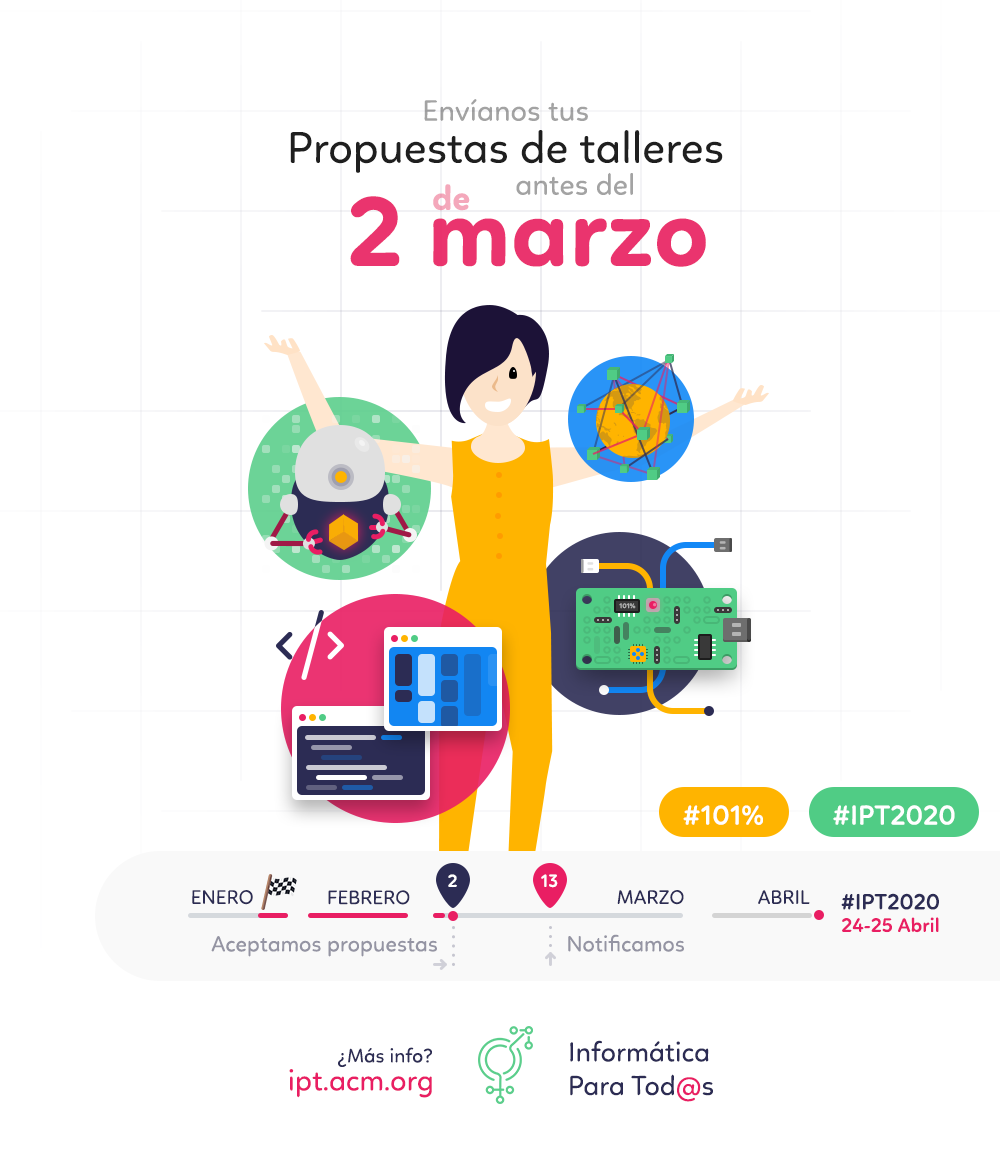
<style>
.page{position:relative;width:1000px;height:1150px;background:#ffffff}
.page>*{position:absolute;margin:0}
.t1{font:30px "Linotte-Regular";color:#a3a3a3}
.t2{font:45px "Linotte-Regular";color:#1f1f1f}
.t3{font:35px "Linotte-Bold";color:#f4a8bb}
.t4{font:101px "Linotte-Bold";color:#e91e63}
.t5{font:7px "Linotte-Bold";color:#afafaf;text-transform:uppercase}
.t6{font:28px "Linotte-SemiBold";color:#ffffff}
.t7{font:18px "Linotte-SemiBold";color:#ffffff;text-transform:uppercase}
.t8{font:20px "Linotte-Regular";color:#2c2c54;text-transform:uppercase}
.t9{font:22.5px "Linotte-SemiBold";color:#2c2c54}
.t10{font:20px "Linotte-SemiBold";color:#e91e63}
.t11{font:22.5px "Linotte-Regular";color:#9494a3}
.t12{font:20px "Linotte-Regular";color:#2c2c54}
.t13{font:28px "Linotte-Regular";color:#2c2c54}
.t14{font:28px "Linotte-Regular";color:#e91e63}
.t15{font:30px "Linotte-Regular";color:#e91e63}
</style>
<div class="page">
<p class="t1" style="left:424px;top:99px;width:164px;height:22px">Envíanos tus</p>
<p class="t2" style="left:290px;top:130px;width:433px;height:43px">Propuestas de talleres</p>
<p class="t1" style="left:516px;top:172px;width:117px;height:23px">antes del</p>
<p class="t3" style="left:433px;top:184px;width:37px;height:27px">de</p>
<p class="t4" style="left:350px;top:196px;width:356px;height:71px;opacity:0.95">2 marzo</p>
<p class="t5" style="left:619px;top:603px;width:17px;height:6px">101%</p>
<p class="t6" style="left:683px;top:805px;width:80px;height:20px">#101%</p>
<p class="t6" style="left:833px;top:805px;width:122px;height:20px">#IPT2020</p>
<p class="t7" style="left:448px;top:874px;width:9px;height:13px">2</p>
<p class="t7" style="left:541px;top:874px;width:17px;height:14px">13</p>
<p class="t8" style="left:192px;top:890px;width:61px;height:15px">ENEro</p>
<p class="t8" style="left:328px;top:890px;width:82px;height:15px">FEBRERO</p>
<p class="t8" style="left:617px;top:890px;width:67px;height:15px">MARzo</p>
<p class="t8" style="left:758px;top:890px;width:52px;height:14px">ABRIL</p>
<p class="t9" style="left:841px;top:893px;width:98px;height:17px">#IPT2020</p>
<p class="t10" style="left:842px;top:917px;width:97px;height:16px">24-25 Abril</p>
<p class="t11" style="left:211px;top:936px;width:226px;height:21px">Aceptamos propuestas</p>
<p class="t11" style="left:568px;top:934px;width:116px;height:18px">Notificamos</p>
<p class="t12" style="left:338px;top:1047px;width:94px;height:20px">¿Más info?</p>
<p class="t13" style="left:570px;top:1040px;width:143px;height:62px;text-align:right">Informática<br>Para Tod<span class="t14">@</span>s</p>
<p class="t15" style="left:289px;top:1069px;width:143px;height:29px">ipt.acm.org</p>
</div>
